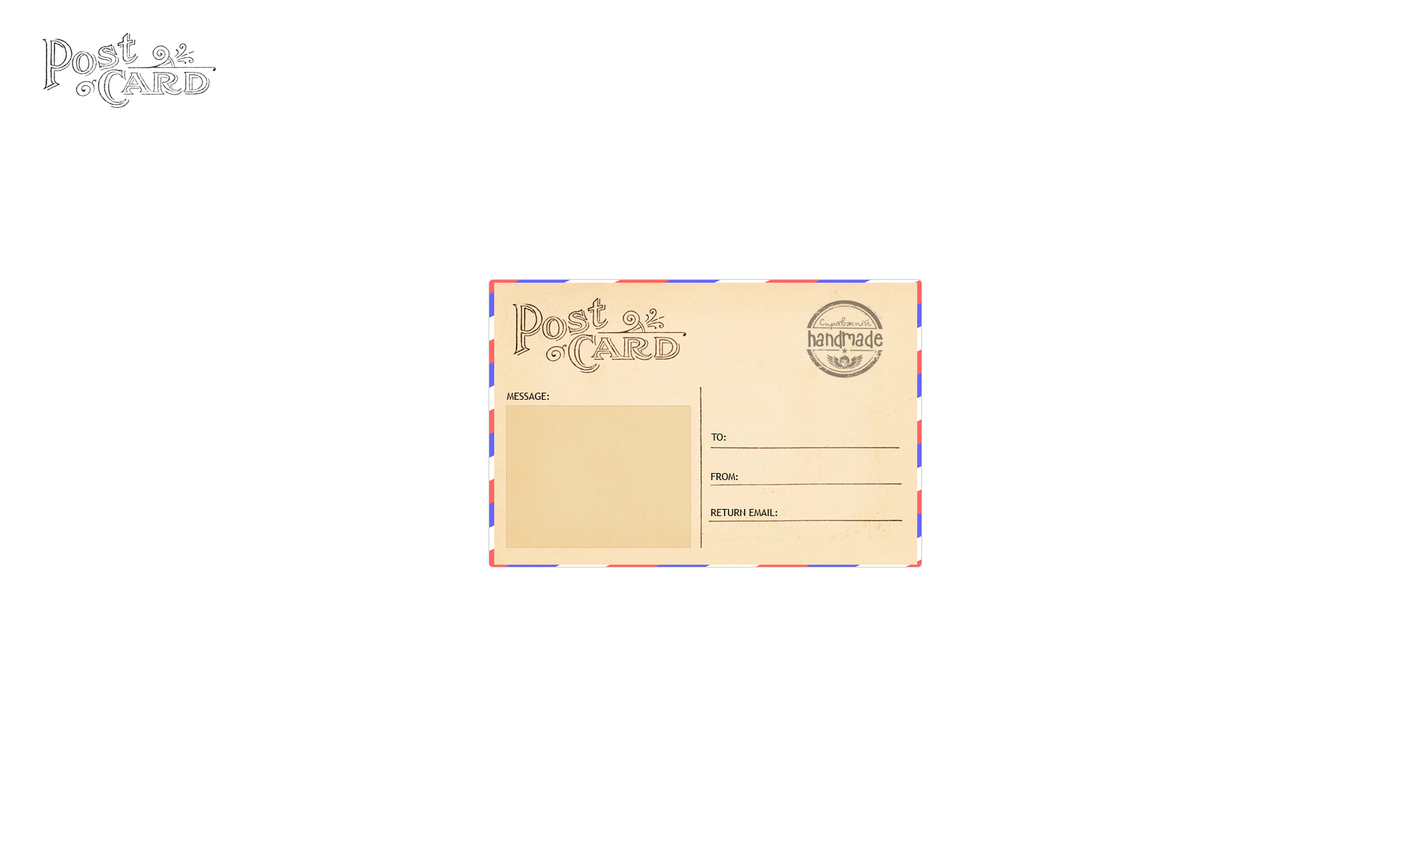
<style>
.page{position:relative;width:1410px;height:846px;background:#ffffff}
.page>*{position:absolute;margin:0}
.t1{font:9.9px "TrebuchetMS";color:#000000}
</style>
<div class="page">
<p class="t1" style="left:507px;top:393px;width:42px;height:7px">MESSAGE:</p>
<p class="t1" style="left:711px;top:433px;width:15px;height:8px">TO:</p>
<p class="t1" style="left:711px;top:473px;width:27px;height:7px">FROM:</p>
<p class="t1" style="left:711px;top:509px;width:66px;height:7px">RETURN EMAIL:</p>
</div>
